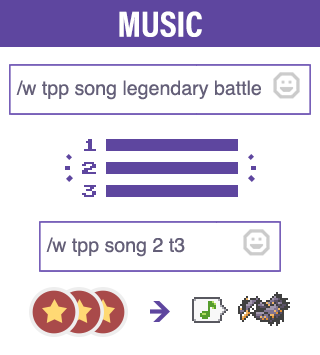
<style>
.page{position:relative;width:320px;height:355px;background:#ffffff}
.page>*{position:absolute;margin:0}
.t1{font:36.3px "AcuminProCond-Bold";color:#ffffff;text-transform:uppercase}
.t2{font:19.6px "Helvetica";color:#645f78}
.t3{font:16px/23px "PokemonGB";color:#5e469f}
</style>
<div class="page">
<p class="t1" style="left:119px;top:11px;width:83px;height:26px">Music</p>
<p class="t2" style="left:16px;top:80px;width:245px;height:20px">/w tpp song legendary battle</p>
<p class="t3" style="left:82px;top:139px;width:14px;height:58px">1<br>2<br>3</p>
<p class="t2" style="left:46px;top:237px;width:139px;height:20px">/w tpp song 2 t3</p>
</div>
